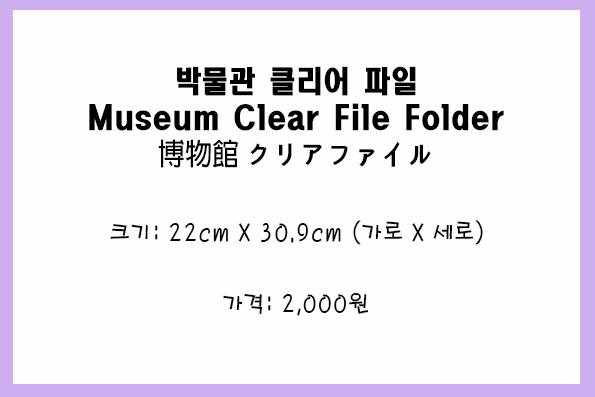
<style>
.page{position:relative;width:595px;height:397px;background:#fffefe}
.page>*{position:absolute;margin:0}
.t1{font:30px/36px "HeadlineR-HM";color:#010101;scale:0.9 1}
.t2{font:30px/36px "AdobeFanHeitiStd-Bold";color:#010101;scale:0.9 1}
.t3{font:24px "H2porM";color:#040404;scale:0.9 1}
</style>
<div class="page">
<p class="t1" style="left:89px;top:66px;width:415px;height:102px;text-align:center">박물관 클리어 파일<br>Museum Clear File Folder<br><span class="t2">博物館 </span>クリアファイル</p>
<p class="t3" style="left:110px;top:220px;width:373px;height:25px">크기: 22cm X 30.9cm (가로 X 세로)</p>
<p class="t3" style="left:223px;top:292px;width:146px;height:24px">가격: 2,000원</p>
</div>
